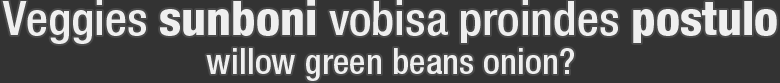
<style>
.page{position:relative;width:780px;height:83px;background:#333333}
.page>*{position:absolute;margin:0}
.t1{font:35.1px/39px "HelveticaNeueLTPro-MdCn";color:#efefef}
.t2{font:47px/39px "HelveticaNeueLTPro-MdCn";color:#efefef}
.t3{font:47px/39px "HelveticaNeueLTPro-HvCn";color:#efefef}
</style>
<div class="page">
<p class="t1" style="left:2px;top:0px;width:775px;height:81px;text-align:center"><span class="t2">Veggies </span><span class="t3">sunboni</span><span class="t2"> vobisa proindes </span><span class="t3">postulo<br></span>willow green beans onion?</p>
</div>
